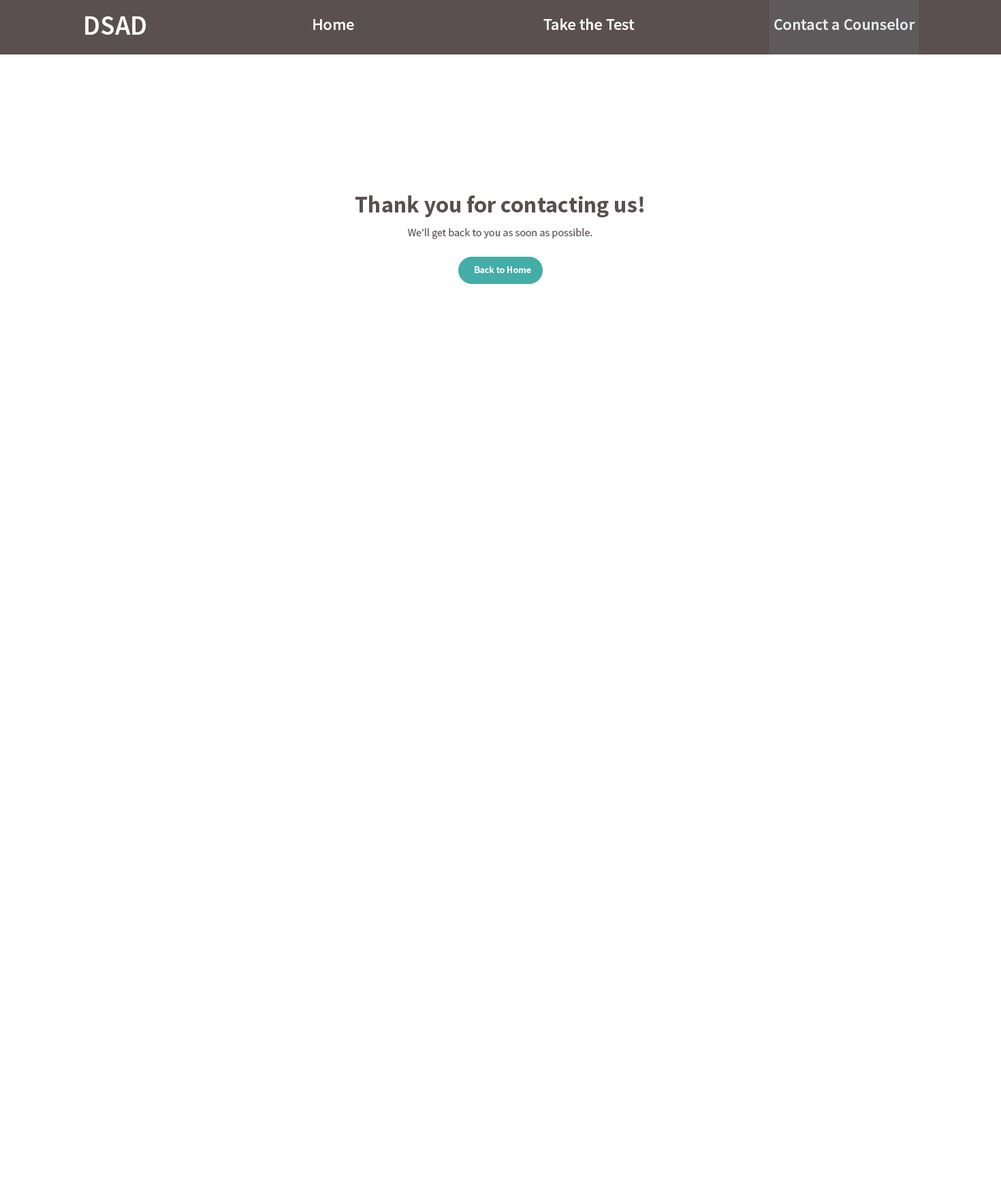
<style>
.page{position:relative;width:1001px;height:1191px;background:#ffffff}
.page>*{position:absolute;margin:0}
.t1{font:27.2px "SourceSansPro-Semibold";color:#ffffff}
.t2{font:16.3px "SourceSansPro-Semibold";color:#ffffff}
.t3{font:10.9px "SourceSansPro-Regular";color:#5a5050}
.t4{font:23.2px/10.9px "SourceSansPro-Bold";color:#5a5050}
.t5{font:9.5px "SourceSansPro-Semibold";color:#ffffff}
</style>
<div class="page">
<p class="t1" style="left:85px;top:16px;width:61px;height:19px">DSAD</p>
<p class="t2" style="left:313px;top:19px;width:41px;height:11px">Home</p>
<p class="t2" style="left:543px;top:18px;width:92px;height:12px">Take the Test</p>
<p class="t2" style="left:774px;top:18px;width:141px;height:12px">Contact a Counselor</p>
<p class="t3" style="left:355px;top:195px;width:289px;height:44px;text-align:center"><span class="t4">Thank you for contacting us!<br><br></span>We’ll get back to you as soon as possible.</p>
<p class="t5" style="left:475px;top:266px;width:56px;height:7px">Back to Home</p>
</div>
